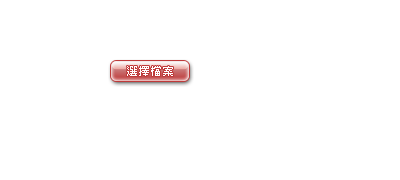
<style>
.page{position:relative;width:400px;height:180px;background:#ffffff}
.page>*{position:absolute;margin:0}
.t1{font:11px "MingLiU";color:#ffffff}
</style>
<div class="page">
<p class="t1" style="left:127px;top:66px;width:46px;height:10px">選擇檔案</p>
</div>
